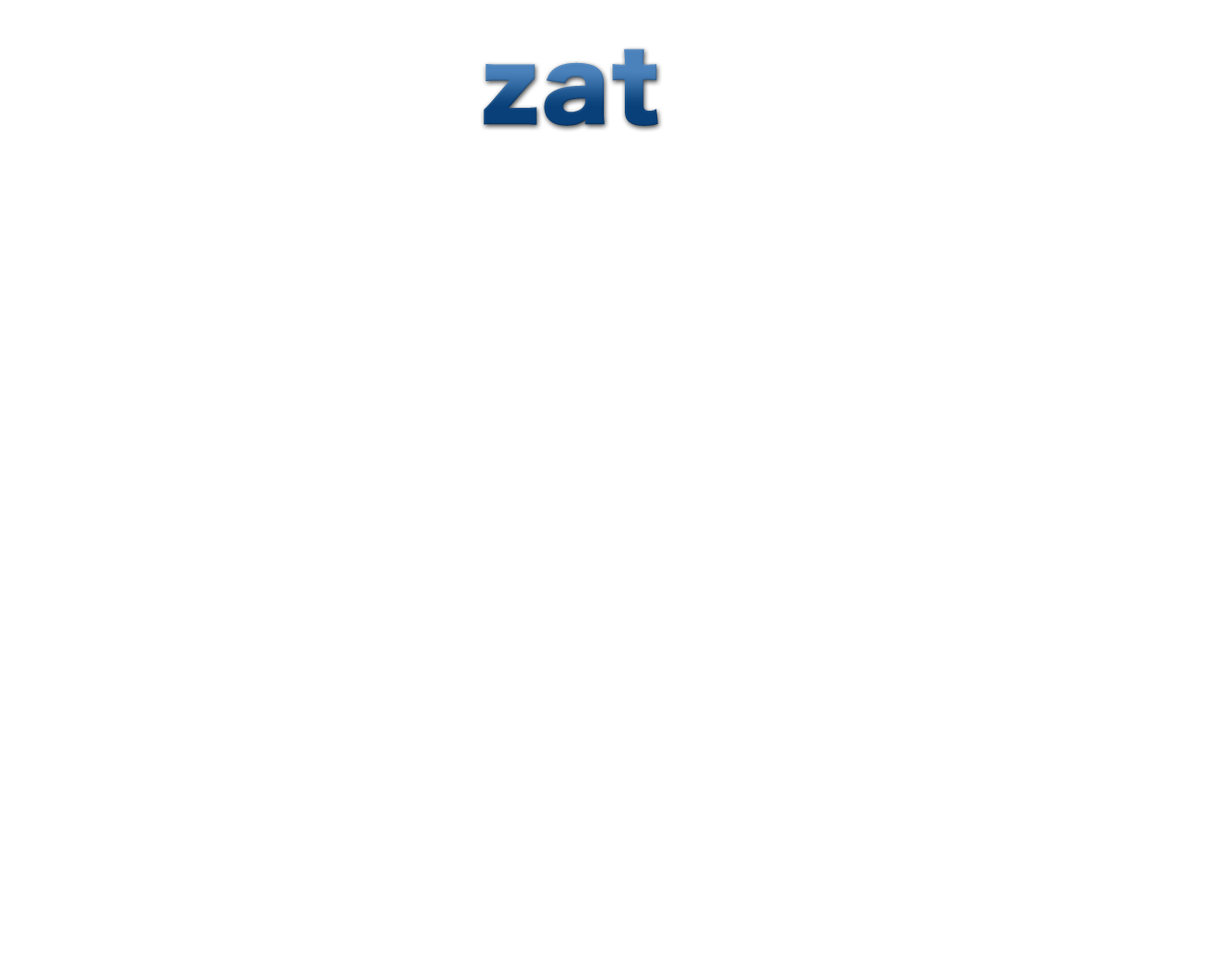
<style>
.page{position:relative;width:1221px;height:977px;background:#ffffff}
.page>*{position:absolute;margin:0}
.t1{font:97.3px "HiraKakuStdN-W8";font-weight:bold}
</style>
<div class="page">
<p class="t1" style="left:484px;top:49px;width:174px;height:77px">zat</p>
</div>
